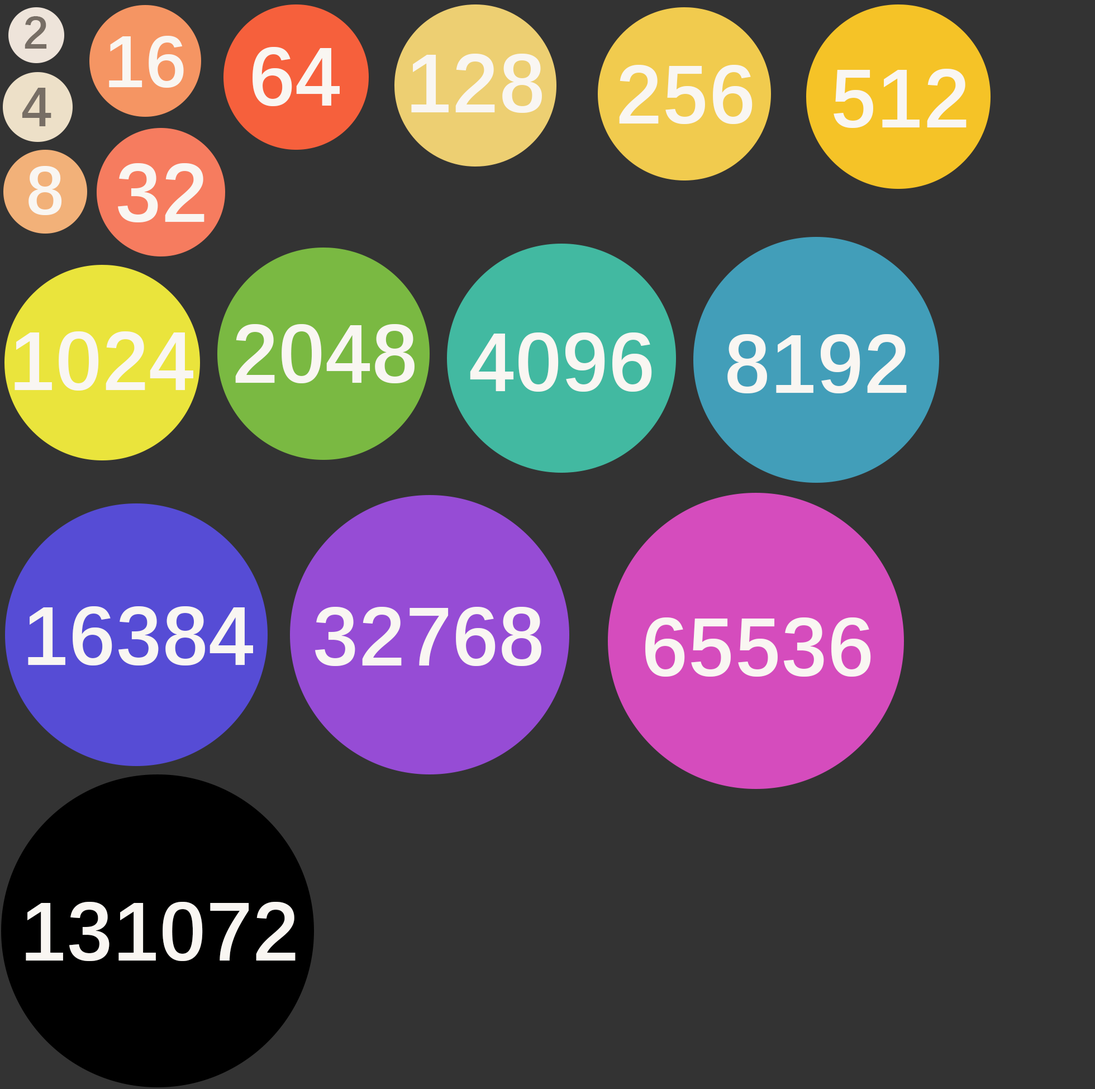
<style>
.page{position:relative;width:1095px;height:1089px;background:#333333}
.page>*{position:absolute;margin:0}
.t1{font:46.6px "DengXian-Bold";color:#776e65}
.t2{font:74.5px "DengXian-Bold";color:#f9f6f2}
.t3{font:83.8px "DengXian-Bold";color:#f9f6f2}
.t4{font:55.9px "DengXian-Bold";color:#776e65}
.t5{font:69.8px "DengXian-Bold";color:#f9f6f2}
</style>
<div class="page">
<p class="t1" style="left:25px;top:16px;width:22px;height:33px">2</p>
<p class="t2" style="left:109px;top:36px;width:75px;height:52px">16</p>
<p class="t3" style="left:253px;top:47px;width:87px;height:59px">64</p>
<p class="t3" style="left:411px;top:54px;width:131px;height:59px">128</p>
<p class="t3" style="left:619px;top:65px;width:134px;height:59px">256</p>
<p class="t3" style="left:834px;top:69px;width:133px;height:59px">512</p>
<p class="t4" style="left:22px;top:88px;width:29px;height:38px">4</p>
<p class="t5" style="left:28px;top:166px;width:34px;height:49px">8</p>
<p class="t3" style="left:118px;top:163px;width:86px;height:59px">32</p>
<p class="t3" style="left:235px;top:324px;width:180px;height:59px">2048</p>
<p class="t3" style="left:15px;top:331px;width:178px;height:60px">1024</p>
<p class="t3" style="left:470px;top:332px;width:182px;height:60px">4096</p>
<p class="t3" style="left:727px;top:334px;width:180px;height:59px">8192</p>
<p class="t3" style="left:28px;top:606px;width:225px;height:59px">16384</p>
<p class="t3" style="left:315px;top:607px;width:226px;height:59px">32768</p>
<p class="t3" style="left:645px;top:617px;width:226px;height:60px">65536</p>
<p class="t3" style="left:26px;top:902px;width:270px;height:59px">131072</p>
</div>
